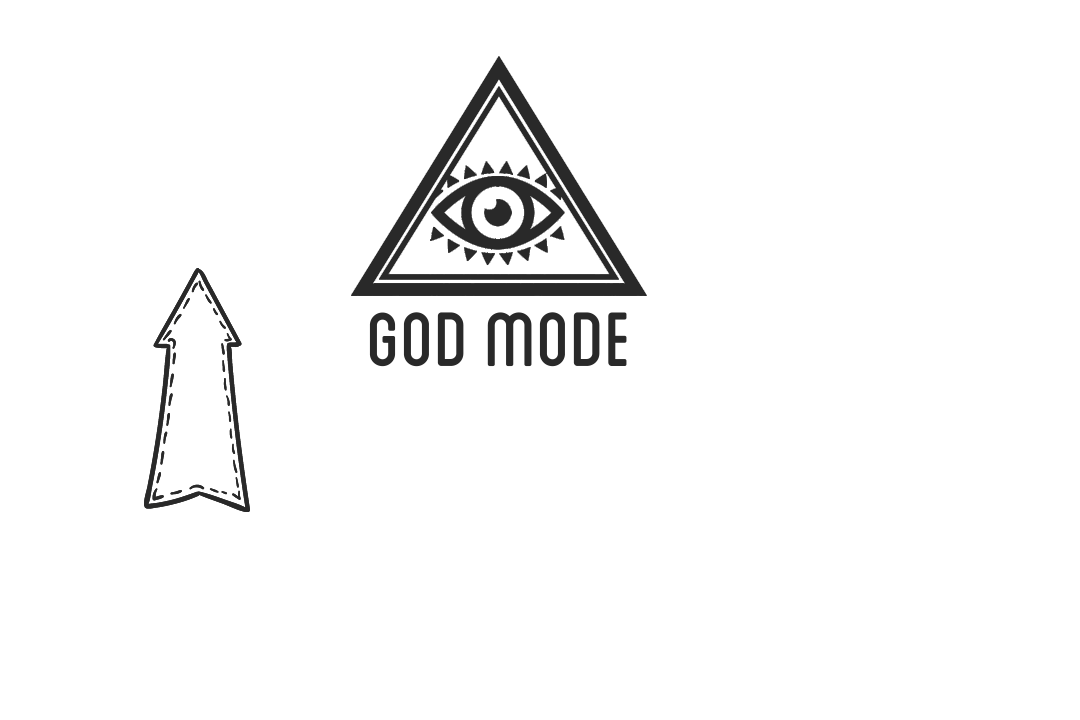
<style>
.page{position:relative;width:1080px;height:720px;background:#ffffff}
.page>*{position:absolute;margin:0}
.t1{font:108.3px "Blanch-Caps";color:#292929}
</style>
<div class="page">
<p class="t1" style="left:369px;top:312px;width:258px;height:55px">GOD MODE</p>
</div>
